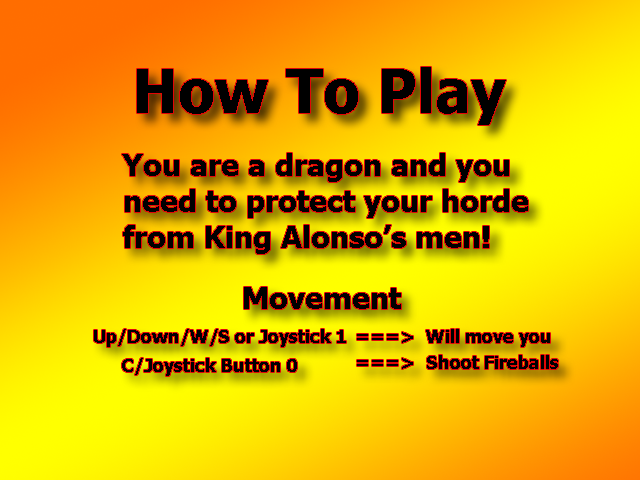
<style>
.page{position:relative;width:640px;height:480px}
.page>*{position:absolute;margin:0}
.t1{font:60px "Tahoma-Bold";color:#000000}
.t2{font:30px "Tahoma-Bold";color:#000000}
.t3{font:18px "Tahoma-Bold";color:#000000}
</style>
<div class="page">
<p class="t1" style="left:137px;top:67px;width:369px;height:58px">How To Play</p>
<p class="t2" style="left:122px;top:153px;width:406px;height:101px">You are a dragon and you<br>need to protect your horde<br>from King Alonso’s men!</p>
<p class="t2" style="left:244px;top:287px;width:157px;height:22px">Movement</p>
<p class="t3" style="left:94px;top:329px;width:252px;height:18px">Up/Down/W/S or Joystick 1</p>
<p class="t3" style="left:426px;top:329px;width:124px;height:18px">Will move you</p>
<p class="t3" style="left:357px;top:332px;width:56px;height:11px">===&gt;</p>
<p class="t3" style="left:122px;top:358px;width:175px;height:18px">C/Joystick Button 0</p>
<p class="t3" style="left:357px;top:358px;width:56px;height:11px">===&gt;</p>
<p class="t3" style="left:427px;top:355px;width:131px;height:14px">Shoot Fireballs</p>
</div>
